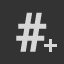
<style>
.page{position:relative;width:64px;height:64px;background:#333333}
.page>*{position:absolute;margin:0}
.t1{font:55px "Roboto-Black";color:#d7d7d7}
</style>
<div class="page">
<p class="t1" style="left:16px;top:12px;width:31px;height:40px">#</p>
</div>
